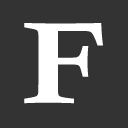
<style>
.page{position:relative;width:128px;height:128px;background:#333333}
.page>*{position:absolute;margin:0}
.t1{font:115.7px "CalisMTBol";color:#ffffff;scale:1.12 1}
</style>
<div class="page">
<p class="t1" style="left:24px;top:23px;width:79px;height:81px">F</p>
</div>
